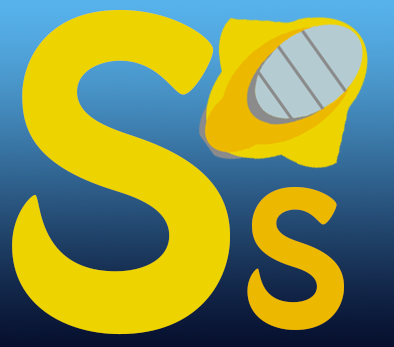
<style>
.page{position:relative;width:394px;height:347px;background:#edd400}
.page>*{position:absolute;margin:0}
.t1{font:375px "HoboStd";color:#edd400}
.t2{font:166.7px "HoboStd";color:#edb800}
</style>
<div class="page">
<p class="t1" style="left:12px;top:9px;width:332px;height:326px">S<span class="t2">S</span></p>
</div>
